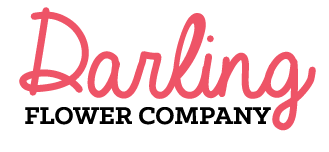
<style>
.page{position:relative;width:329px;height:152px;background:#ffffff}
.page>*{position:absolute;margin:0}
.t1{font:124.2px "AlwaysInMyHeart";color:#ee5467}
.t2{font:27.3px "KlinicSlab-Bold";color:#000000;text-transform:uppercase}
</style>
<div class="page">
<p class="t1" style="left:19px;top:7px;width:297px;height:124px">Darling</p>
<p class="t2" style="left:25px;top:107px;width:246px;height:18px">flower company</p>
</div>
